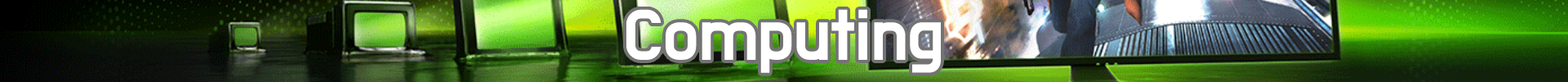
<style>
.page{position:relative;width:1568px;height:82px}
.page>*{position:absolute;margin:0}
.t1{font:73.5px "DoHyeon-Regular";color:#ffffff}
</style>
<div class="page">
<p class="t1" style="left:626px;top:9px;width:316px;height:64px">Computing</p>
</div>
